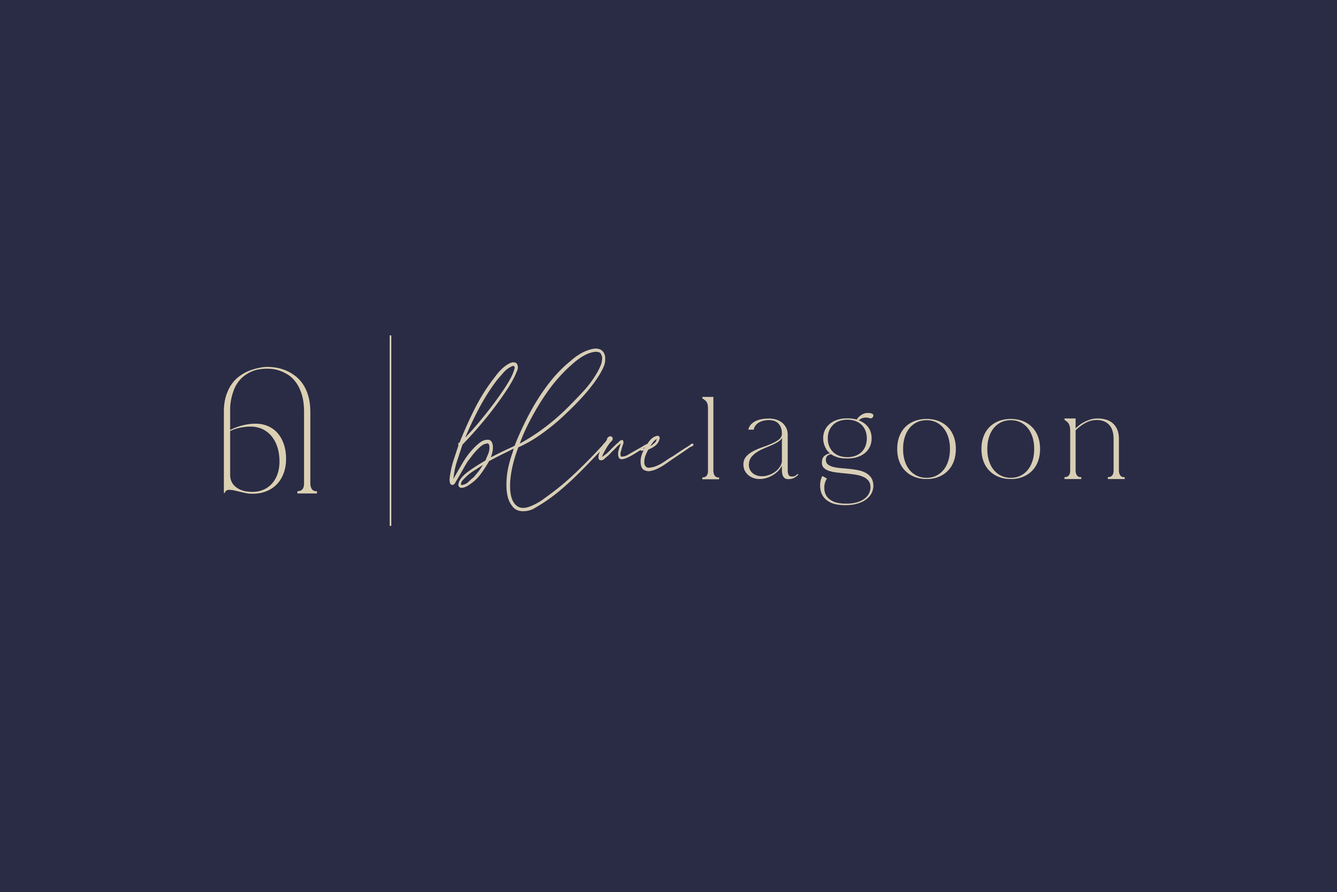
<style>
.page{position:relative;width:1337px;height:892px;background:#2a2c45}
.page>*{position:absolute;margin:0}
.t1{font:96.2px "LaLuxesSerif";letter-spacing:0.18em;color:#d8ceb6}
.t2{font:198.7px "LaLuxesScript";color:#d8ceb6}
.t3{font:198.7px "LaLuxesScript";letter-spacing:0.04em;color:#d8ceb6}
.t4{font:112.2px "LaLuxesSerif";color:#dcd0b3}
</style>
<div class="page">
<p class="t1" style="left:449px;top:348px;width:676px;height:163px"><span class="t2">blu</span><span class="t3">e</span>lagoon</p>
<p class="t4" style="left:224px;top:366px;width:93px;height:128px">bl</p>
</div>
